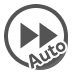
<style>
.page{position:relative;width:72px;height:72px;background:#ffffff}
.page>*{position:absolute;margin:0}
.t1{font:18.8px "MikadoMedium";color:#535453}
</style>
<div class="page">
<p class="t1" style="left:29px;top:42px;width:37px;height:27px;rotate:-30deg">Auto</p>
</div>
